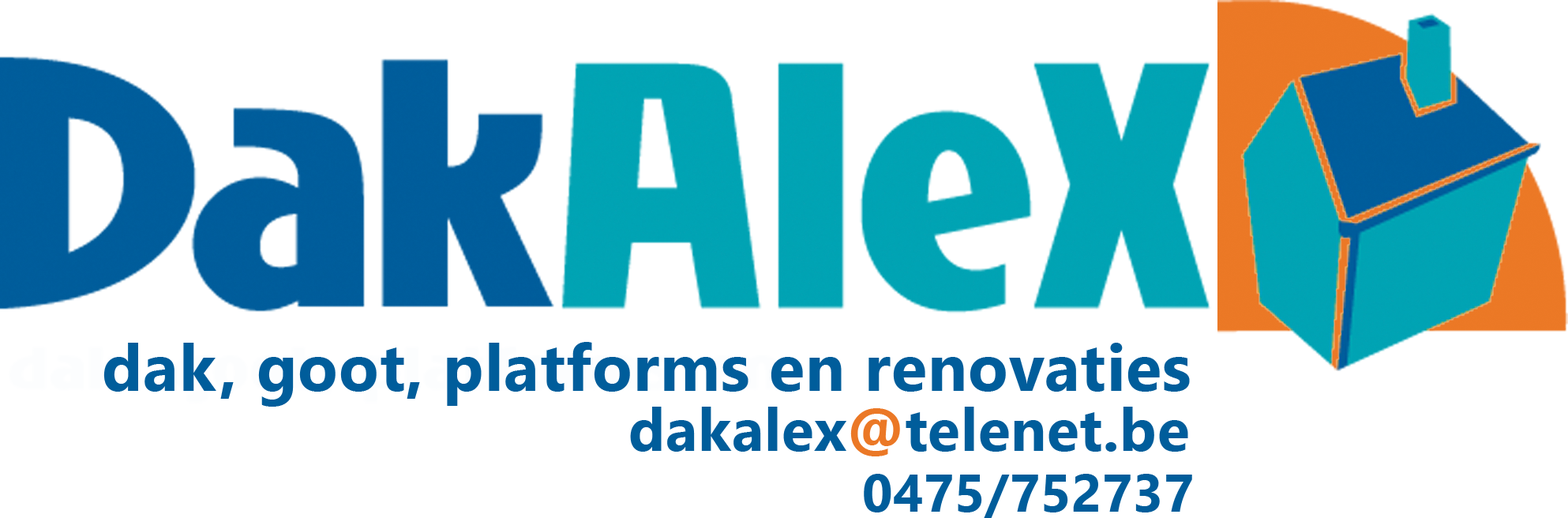
<style>
.page{position:relative;width:1568px;height:518px;background:#ffffff}
.page>*{position:absolute;margin:0}
.t1{font:65.8px "SegoeUI-Bold";letter-spacing:0.01em;color:#005d9b}
.t2{font:59.2px "SegoeUI-Bold";letter-spacing:0.01em;color:#005d9b}
.t3{font:59.2px "SegoeUI-Bold";letter-spacing:0.01em;color:#eb7826}
.t4{font:52.6px "SegoeUI-Bold";letter-spacing:0.01em;color:#005d9b}
</style>
<div class="page">
<p class="t1" style="left:103px;top:342px;width:1087px;height:65px">dak, goot, platforms en renovaties</p>
<p class="t2" style="left:630px;top:407px;width:558px;height:49px">dakalex<span class="t3">@</span>telenet.be</p>
<p class="t4" style="left:864px;top:474px;width:328px;height:44px">0475/752737</p>
</div>
